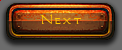
<style>
.page{position:relative;width:122px;height:50px}
.page>*{position:absolute;margin:0}
.t1{font:12.3px "CarletonRusNormal";letter-spacing:0.147em;color:#ffc500;scale:1.09 1}
</style>
<div class="page">
<p class="t1" style="left:40px;top:14px;width:42px;height:10px">Next</p>
</div>
